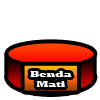
<style>
.page{position:relative;width:100px;height:100px;background:#ffffff}
.page>*{position:absolute;margin:0}
.t1{font:8.2px "Rockwell-ExtraBold";color:#ffffff;scale:1.28 1}
</style>
<div class="page">
<p class="t1" style="left:30px;top:71px;width:42px;height:16px;text-align:center">Benda<br>Mati</p>
</div>
